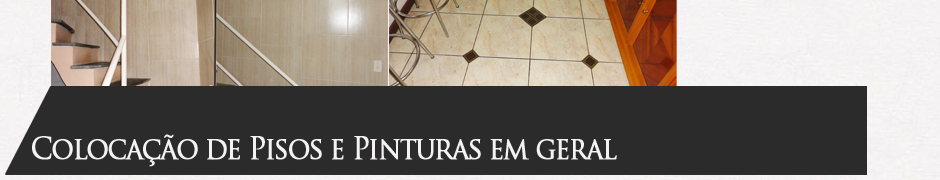
<style>
.page{position:relative;width:940px;height:180px;background:#2b2b2b}
.page>*{position:absolute;margin:0}
.t1{font:30px "TrajanPro-Regular";letter-spacing:-0.075em;color:#f4f2f3;font-weight:bold;scale:0.93 1}
</style>
<div class="page">
<p class="t1" style="left:32px;top:134px;width:585px;height:33px">Colocação de Pisos e Pinturas em geral</p>
</div>
